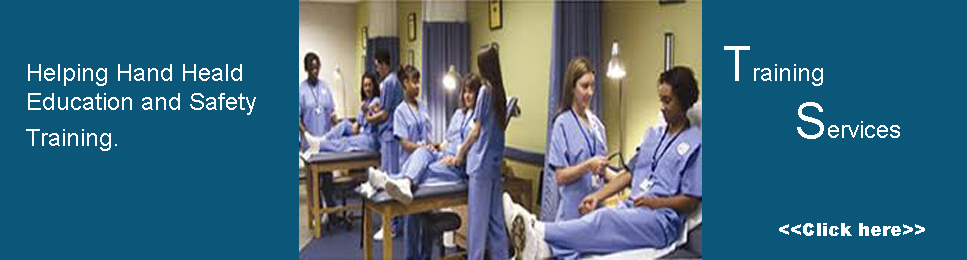
<style>
.page{position:relative;width:967px;height:260px;background:#0b5779}
.page>*{position:absolute;margin:0}
.t1{font:24px "ArialMT";color:#ffffff}
.t2{font:48px "ArialMT";color:#ffffff}
.t3{font:18px "Arial-Black";color:#ffffff}
</style>
<div class="page">
<p class="t1" style="left:724px;top:46px;width:176px;height:93px"><span class="t2">T</span>raining <br>  <span class="t2">S</span>ervices</p>
<p class="t1" style="left:26px;top:64px;width:230px;height:87px">Helping Hand Heald <br>Education and Safety <br>Training.</p>
<p class="t3" style="left:779px;top:223px;width:146px;height:13px">&lt;&lt;Click here&gt;&gt;</p>
</div>
